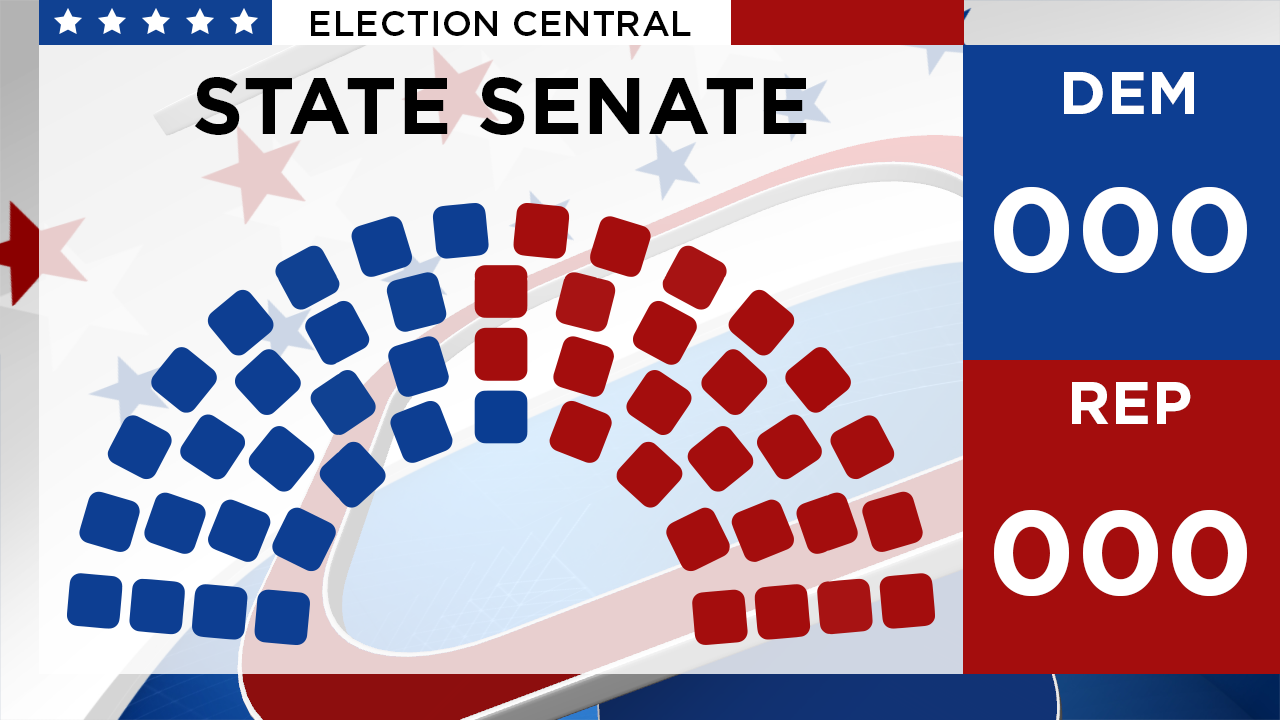
<style>
.page{position:relative;width:1280px;height:720px}
.page>*{position:absolute;margin:0}
.t1{font:35.8px "Gotham-Medium";letter-spacing:0.01em;color:#000000;text-transform:uppercase}
.t2{font:80px "Gotham-Bold";letter-spacing:0.01em;color:#000000;text-transform:uppercase}
.t3{font:60px "Gotham-Bold";letter-spacing:0.01em;color:#ffffff;text-transform:uppercase}
.t4{font:120px "Gotham-Bold";letter-spacing:0.01em;color:#ffffff;text-transform:uppercase}
</style>
<div class="page">
<p class="t1" style="left:311px;top:11px;width:380px;height:25px">election central</p>
<p class="t2" style="left:194px;top:77px;width:613px;height:58px">state senate</p>
<p class="t3" style="left:1064px;top:72px;width:130px;height:42px">dem</p>
<p class="t4" style="left:994px;top:186px;width:253px;height:87px">000</p>
<p class="t3" style="left:1072px;top:382px;width:119px;height:42px">rep</p>
<p class="t4" style="left:994px;top:509px;width:253px;height:87px">000</p>
</div>
